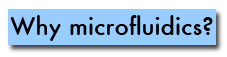
<style>
.page{position:relative;width:227px;height:57px;background:#99ccff}
.page>*{position:absolute;margin:0}
.t1{font:24px "Station-Medium";color:#000000}
</style>
<div class="page">
<p class="t1" style="left:10px;top:15px;width:203px;height:26px">Why microfluidics?</p>
</div>
